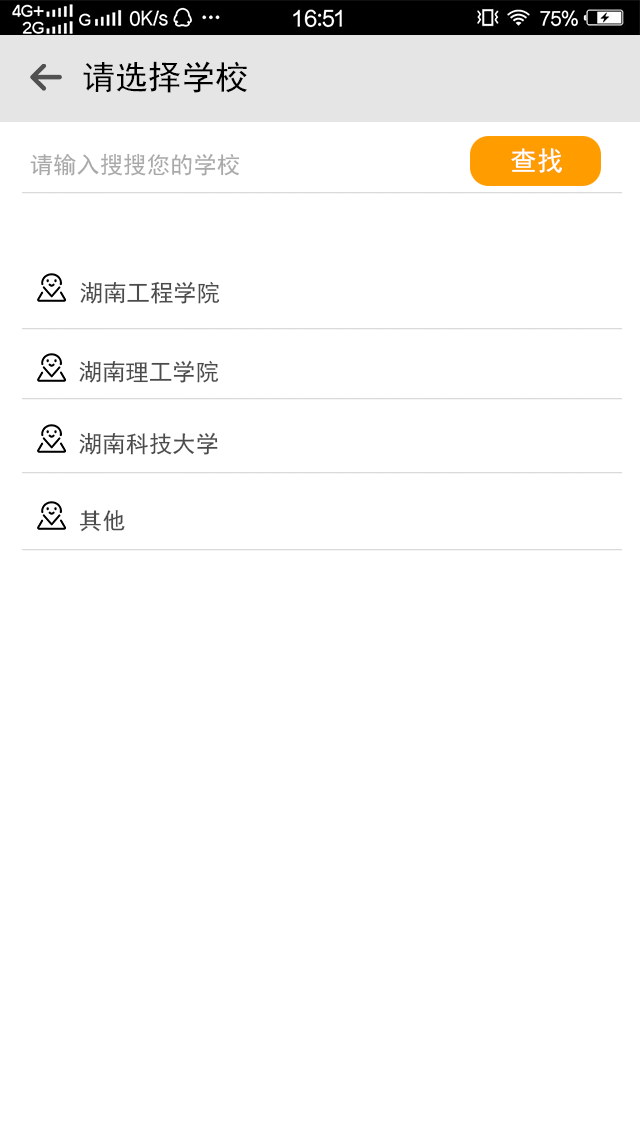
<style>
.page{position:relative;width:640px;height:1136px;background:#ffffff}
.page>*{position:absolute;margin:0}
.t1{font:33.3px "SimHei";letter-spacing:0.002em;color:#000000}
.t2{font:26.7px "SimHei";letter-spacing:0.002em;color:#ffffff}
.t3{font:23.3px "SimHei";letter-spacing:0.002em;color:#a9a9a9}
.t4{font:23.3px "SimHei";letter-spacing:0.002em;color:#4b4b4b}
</style>
<div class="page">
<p class="t1" style="left:83px;top:61px;width:164px;height:32px">请选择学校</p>
<p class="t2" style="left:511px;top:148px;width:51px;height:25px">查找</p>
<p class="t3" style="left:30px;top:153px;width:210px;height:23px">请输入搜搜您的学校</p>
<p class="t4" style="left:80px;top:281px;width:140px;height:23px">湖南工程学院</p>
<p class="t4" style="left:79px;top:360px;width:140px;height:23px">湖南理工学院</p>
<p class="t4" style="left:79px;top:432px;width:139px;height:23px">湖南科技大学</p>
<p class="t4" style="left:79px;top:510px;width:46px;height:22px">其他</p>
</div>
